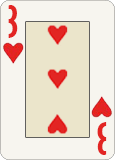
<style>
.page{position:relative;width:115px;height:160px;background:#f7f5ef}
.page>*{position:absolute;margin:0}
.t1{font:41.7px "GillSansMT-ExtraCondensedBold";color:#e22523}
</style>
<div class="page">
<p class="t1" style="left:8px;top:5px;width:10px;height:33px">30</p>
<p class="t1" style="left:97px;top:122px;width:10px;height:33px;rotate:180deg">3</p>
</div>
